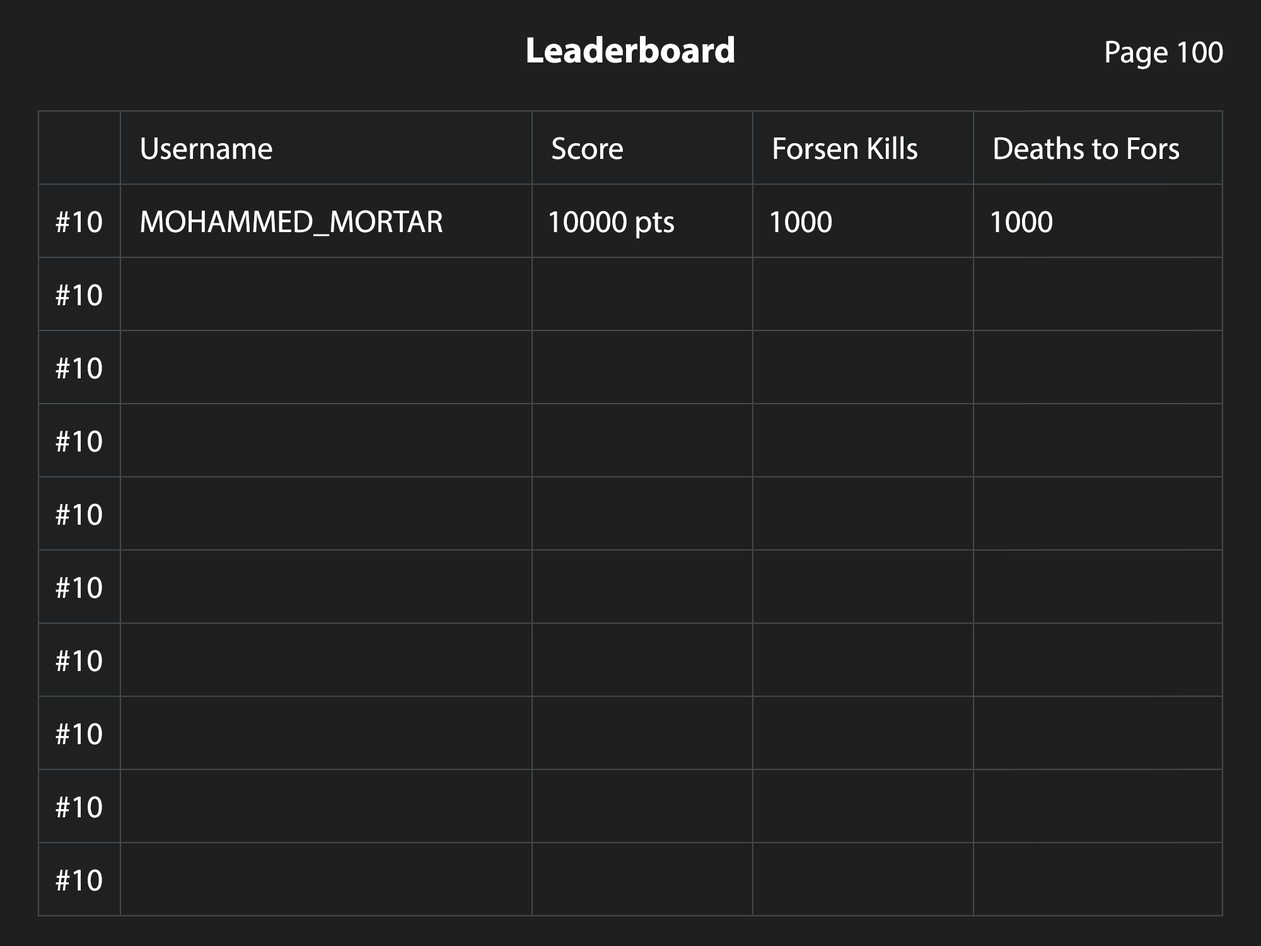
<style>
.page{position:relative;width:1261px;height:946px;background:#1f1f1f}
.page>*{position:absolute;margin:0}
.t1{font:36.8px "MyriadPro-Bold";color:#ffffff}
.t2{font:31.5px "MyriadPro-Regular";color:#ffffff}
</style>
<div class="page">
<p class="t1" style="left:527px;top:36px;width:207px;height:27px">Leaderboard</p>
<p class="t2" style="left:1106px;top:40px;width:117px;height:29px">Page 100</p>
<p class="t2" style="left:141px;top:137px;width:131px;height:23px">Username</p>
<p class="t2" style="left:552px;top:137px;width:71px;height:23px">Score</p>
<p class="t2" style="left:774px;top:136px;width:143px;height:24px">Forsen Kills</p>
<p class="t2" style="left:994px;top:136px;width:185px;height:24px">Deaths to Fors</p>
<p class="t2" style="left:141px;top:210px;width:302px;height:26px">MOHAMMED_MORTAR</p>
<p class="t2" style="left:55px;top:211px;width:47px;height:22px">#10</p>
<p class="t2" style="left:550px;top:211px;width:124px;height:27px">10000 pts</p>
<p class="t2" style="left:771px;top:211px;width:61px;height:22px">1000</p>
<p class="t2" style="left:992px;top:211px;width:60px;height:22px">1000</p>
<p class="t2" style="left:55px;top:284px;width:47px;height:22px">#10</p>
<p class="t2" style="left:55px;top:357px;width:47px;height:22px">#10</p>
<p class="t2" style="left:55px;top:430px;width:47px;height:22px">#10</p>
<p class="t2" style="left:55px;top:503px;width:47px;height:22px">#10</p>
<p class="t2" style="left:55px;top:576px;width:47px;height:22px">#10</p>
<p class="t2" style="left:55px;top:649px;width:47px;height:22px">#10</p>
<p class="t2" style="left:55px;top:723px;width:47px;height:22px">#10</p>
<p class="t2" style="left:55px;top:796px;width:47px;height:22px">#10</p>
<p class="t2" style="left:55px;top:869px;width:47px;height:22px">#10</p>
</div>
